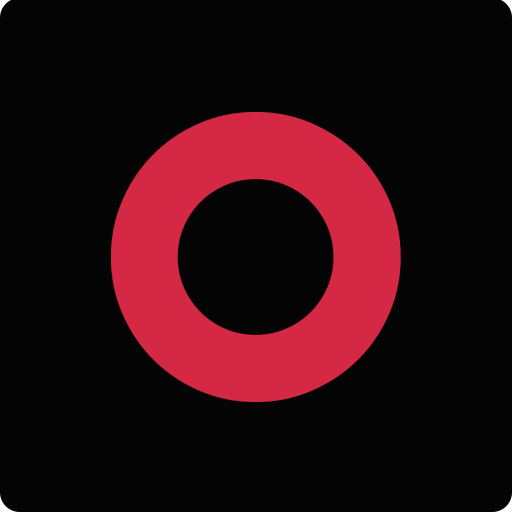
<style>
.page{position:relative;width:512px;height:512px;background:#040404}
.page>*{position:absolute;margin:0}
.t1{font:393.8px "TheBoldFont";color:#d42845}
</style>
<div class="page">
<p class="t1" style="left:111px;top:112px;width:290px;height:290px">O</p>
</div>
